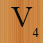
<style>
.page{position:relative;width:43px;height:43px}
.page>*{position:absolute;margin:0}
.t1{font:30px "TimesNewRomanPSMT";color:#0c0c0b}
.t2{font:12px "TimesNewRomanPSMT";color:#0c0c0b}
</style>
<div class="page">
<p class="t1" style="left:11px;top:7px;width:22px;height:20px">V</p>
<p class="t2" style="left:32px;top:28px;width:7px;height:9px">4</p>
</div>
